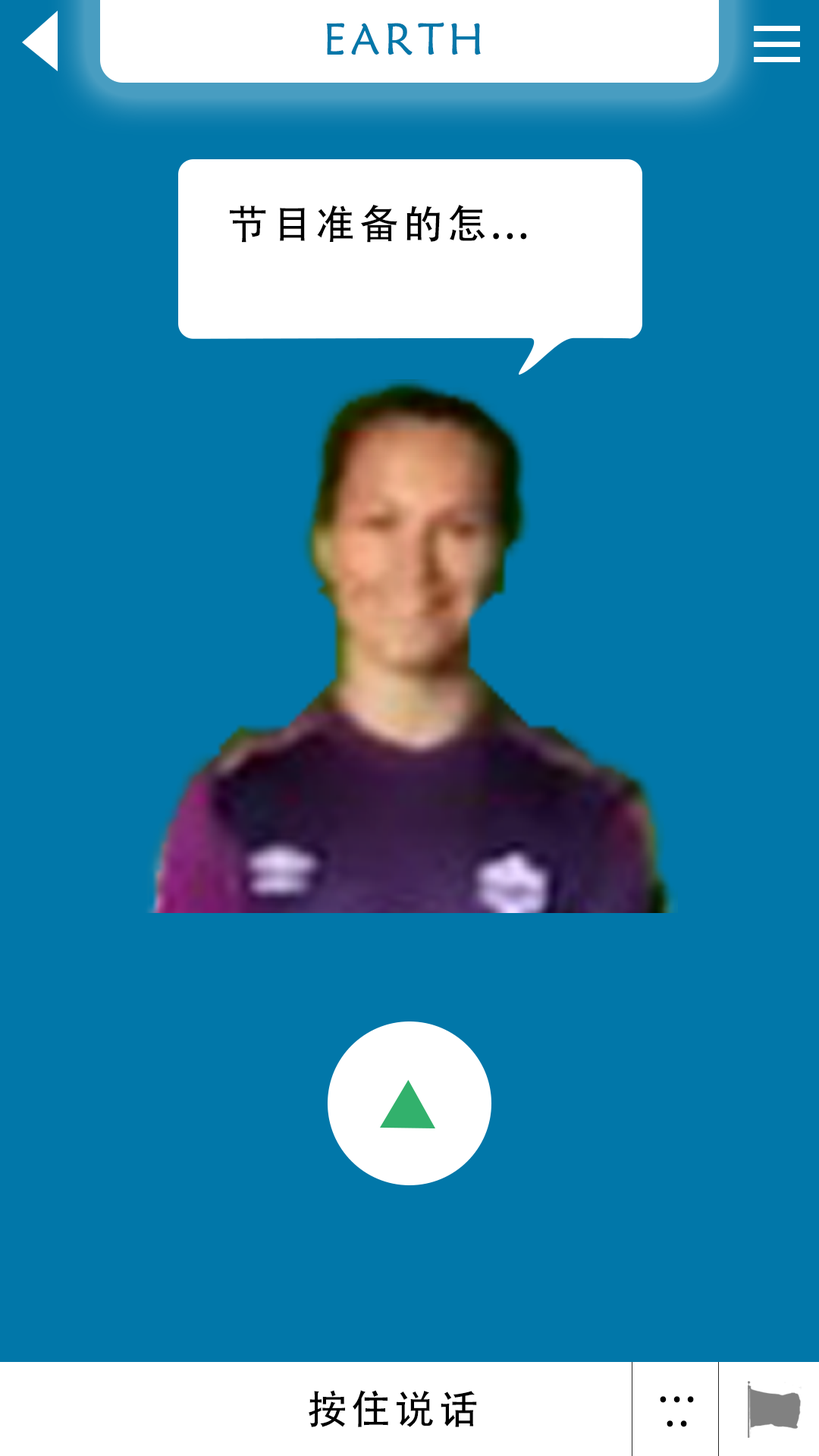
<style>
.page{position:relative;width:819px;height:1456px;background:#0177a9}
.page>*{position:absolute;margin:0}
.t1{font:44.5px "STXinwei";letter-spacing:0.1em;color:#0177a9}
.t2{font:39.9px "AdobeHeitiStd-Regular";letter-spacing:0.1em;color:#000000}
.t3{font:18.7px "AdobeHeitiStd-Regular";letter-spacing:0.1em;color:#000000}
</style>
<div class="page">
<p class="t1" style="left:326px;top:22px;width:155px;height:33px">EARTH</p>
<p class="t2" style="left:230px;top:205px;width:297px;height:38px">节目准备的怎...</p>
<p class="t2" style="left:309px;top:1390px;width:168px;height:37px">按住说话</p>
<p class="t2" style="left:660px;top:1396px;width:34px;height:31px"><span class="t3"> </span>．..<br> ．.</p>
</div>
